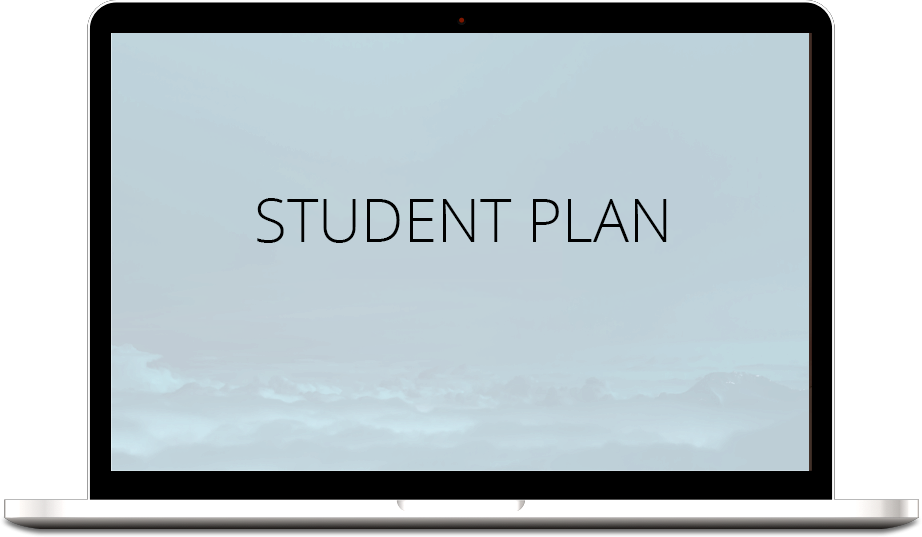
<style>
.page{position:relative;width:922px;height:537px;background:#ffffff}
.page>*{position:absolute;margin:0}
.t1{font:60px "OpenSans-Light";color:#000000}
</style>
<div class="page">
<p class="t1" style="left:257px;top:198px;width:410px;height:45px">STUDENT PLAN</p>
</div>
